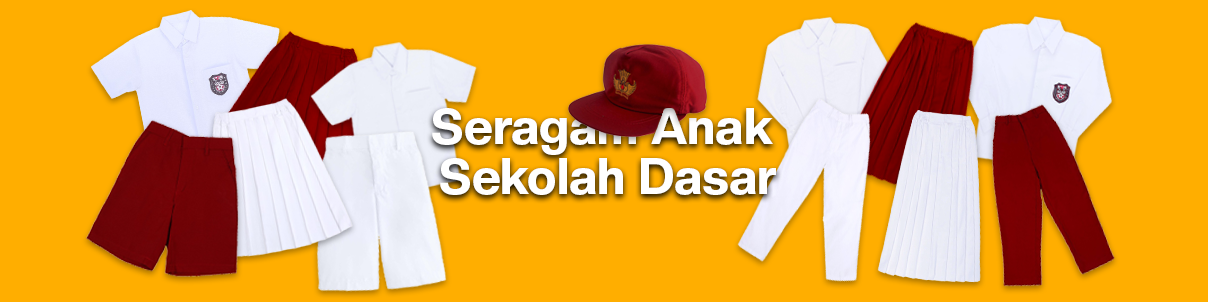
<style>
.page{position:relative;width:1208px;height:302px;background:#ffae00}
.page>*{position:absolute;margin:0}
.t1{font:12px/50px "CreatoDisplay-ExtraBold";color:#ffffff}
</style>
<div class="page">
<p class="t1" style="left:432px;top:108px;width:344px;height:87px;text-align:center">Seragam Anak <br>Sekolah Dasar</p>
</div>
